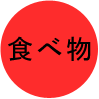
<style>
.page{position:relative;width:99px;height:99px;background:#fe2c2c}
.page>*{position:absolute;margin:0}
.t1{font:26.7px "MS-Gothic";letter-spacing:0.1em;color:#010101}
</style>
<div class="page">
<p class="t1" style="left:8px;top:36px;width:83px;height:25px">食べ物</p>
</div>
